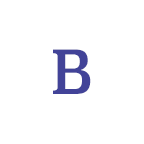
<style>
.page{position:relative;width:144px;height:144px;background:#ffffff}
.page>*{position:absolute;margin:0}
.t1{font:60px "Superclarendon-Regular";color:#424398;scale:0.85 1}
</style>
<div class="page">
<p class="t1" style="left:53px;top:49px;width:38px;height:45px">B</p>
</div>
